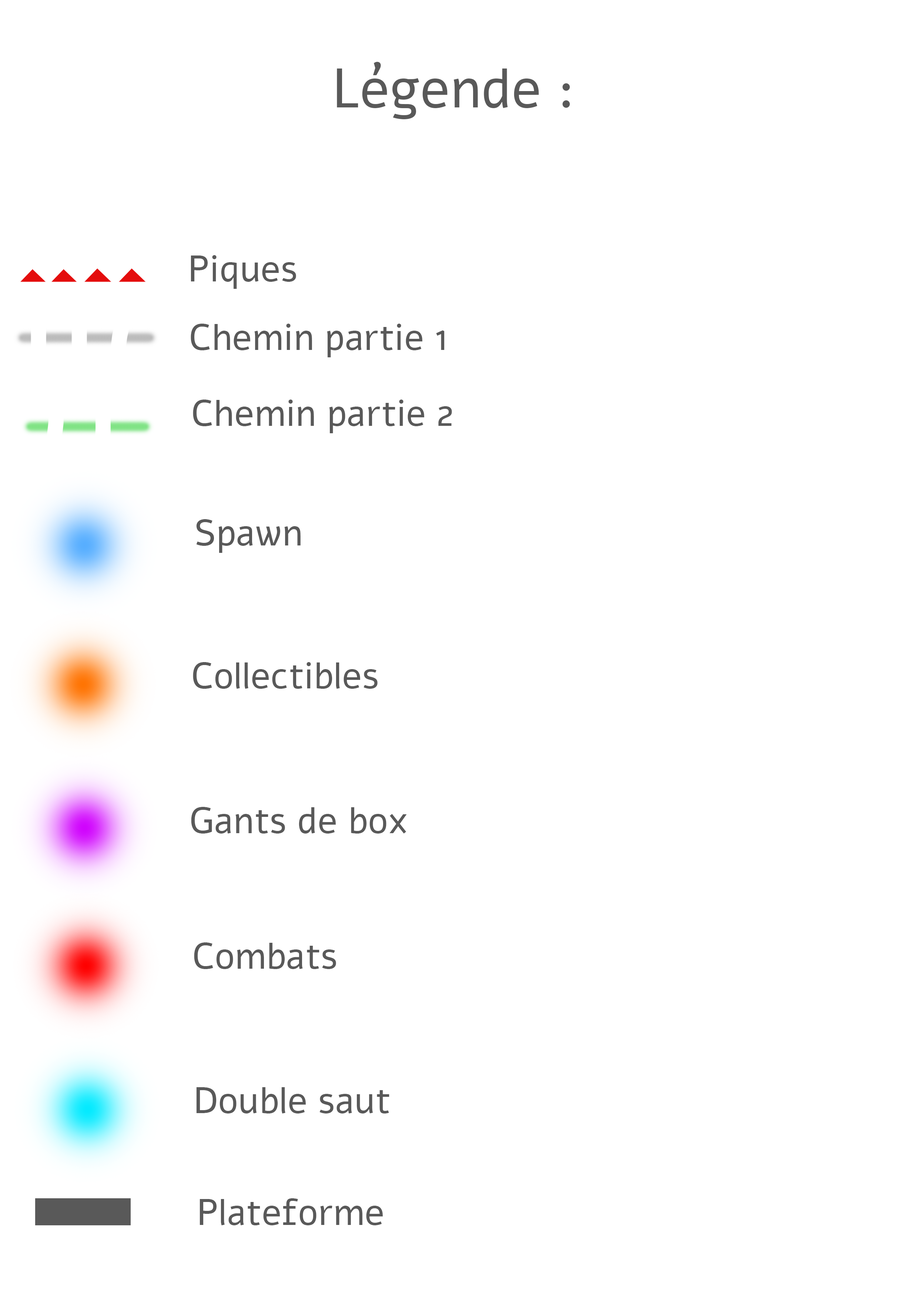
<style>
.page{position:relative;width:918px;height:1299px;background:#ffffff}
.page>*{position:absolute;margin:0}
.t1{font:55.5px "Alef-Regular";color:#595959}
.t2{font:37px "Alef-Regular";color:#595959}
</style>
<div class="page">
<p class="t1" style="left:337px;top:62px;width:233px;height:57px">Légende :</p>
<p class="t2" style="left:191px;top:255px;width:105px;height:34px">Piques</p>
<p class="t2" style="left:191px;top:324px;width:254px;height:33px">Chemin partie 1</p>
<p class="t2" style="left:193px;top:399px;width:259px;height:34px">Chemin partie 2</p>
<p class="t2" style="left:196px;top:519px;width:105px;height:34px">Spawn</p>
<p class="t2" style="left:193px;top:662px;width:185px;height:27px">Collectibles</p>
<p class="t2" style="left:191px;top:807px;width:216px;height:26px">Gants de box</p>
<p class="t2" style="left:194px;top:942px;width:142px;height:27px">Combats</p>
<p class="t2" style="left:196px;top:1087px;width:193px;height:26px">Double saut</p>
<p class="t2" style="left:200px;top:1198px;width:183px;height:27px">Plateforme</p>
</div>
